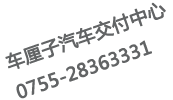
<style>
.page{position:relative;width:173px;height:100px;background:#ffffff}
.page>*{position:absolute;margin:0}
.t1{font:18px "MicrosoftYaHei";color:#626465;font-weight:bold}
</style>
<div class="page">
<p class="t1" style="left:5px;top:2px;width:161px;height:97px;rotate:-19deg">车厘子汽车交付中心<br>0755-28363331</p>
</div>
